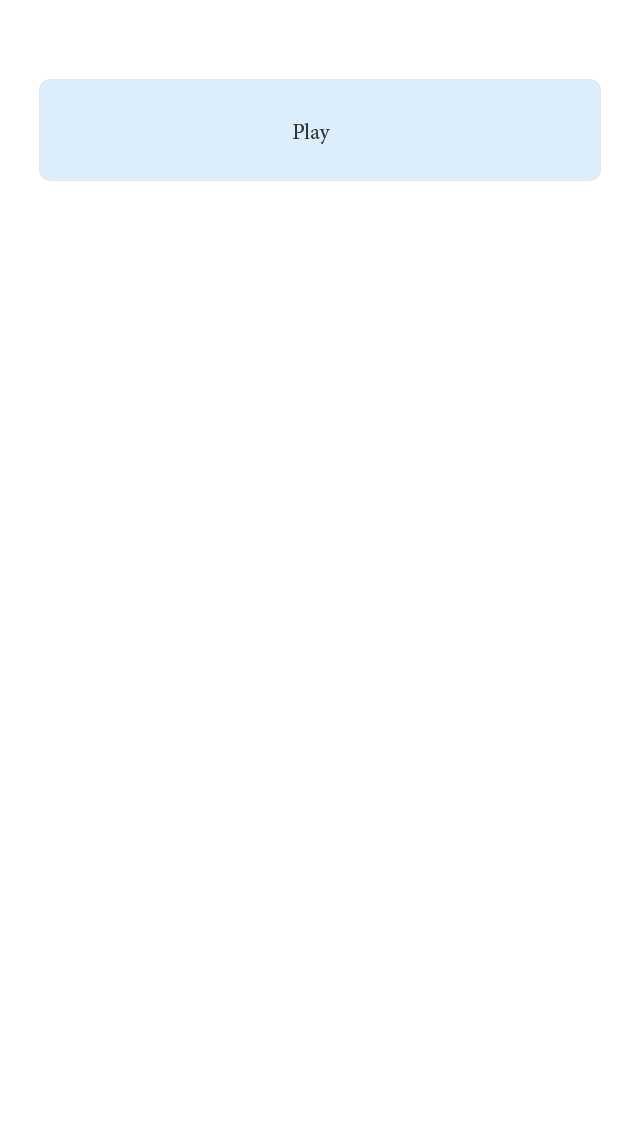
<style>
.page{position:relative;width:640px;height:1136px;background:#ffffff}
.page>*{position:absolute;margin:0}
.t1{font:30px "AdobeArabic-Regular";color:#333333}
</style>
<div class="page">
<p class="t1" style="left:293px;top:123px;width:37px;height:21px">Play</p>
</div>
